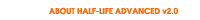
<style>
.page{position:relative;width:200px;height:20px;background:#ffffff}
.page>*{position:absolute;margin:0}
.t1{font:8px "Atlanta-Demi";color:#ff6600}
</style>
<div class="page">
<p class="t1" style="left:49px;top:7px;width:129px;height:8px">ABOUT HALF-LIFE ADVANCED v2.0</p>
</div>
